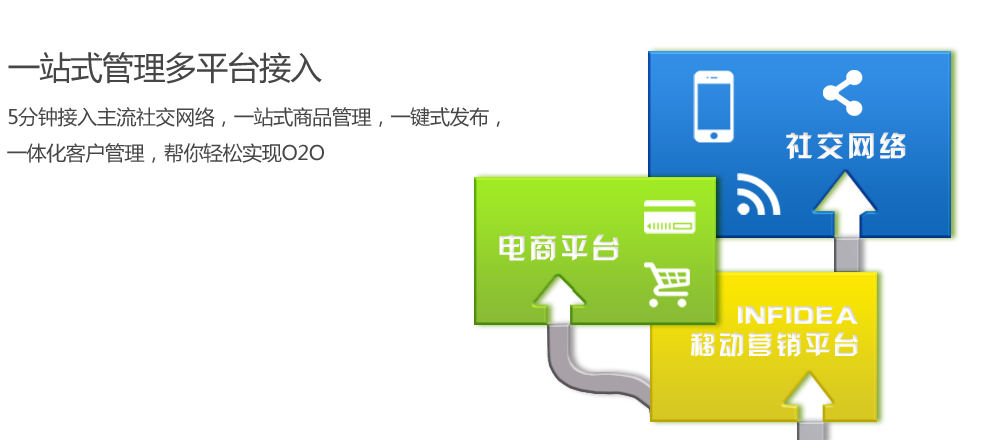
<style>
.page{position:relative;width:1000px;height:440px;background:#ffffff}
.page>*{position:absolute;margin:0}
.t1{font:32px "MicrosoftYaHei";letter-spacing:-0.02em;color:#464646}
.t2{font:20px/36px "MicrosoftYaHei";letter-spacing:-0.02em;color:#464646}
.t3{font:28.5px "JLinXin";letter-spacing:0.1em;color:#fefefe}
.t4{font:26.1px/28.5px "JLinXin";color:#fefefe}
.t5{font:26.1px/42.7px "CopperplateGothic-Light";letter-spacing:0.1em;color:#fefefe}
.t6{font:26.1px/28.5px "JLinXin";letter-spacing:0.1em;color:#fefefe}
</style>
<div class="page">
<p class="t1" style="left:8px;top:52px;width:314px;height:32px">一站式管理多平台接入</p>
<p class="t2" style="left:7px;top:107px;width:493px;height:56px">5分钟接入主流社交网络，一站式商品管理，一键式发布，<br>一体化客户管理，帮你轻松实现O2O</p>
<p class="t3" style="left:786px;top:132px;width:120px;height:28px">社交网络</p>
<p class="t3" style="left:499px;top:234px;width:120px;height:27px">电商平台</p>
<p class="t4" style="left:691px;top:306px;width:167px;height:51px;text-align:right"><span class="t5">    </span>INFIDEA<br><span class="t6">移动营销平台</span></p>
</div>
